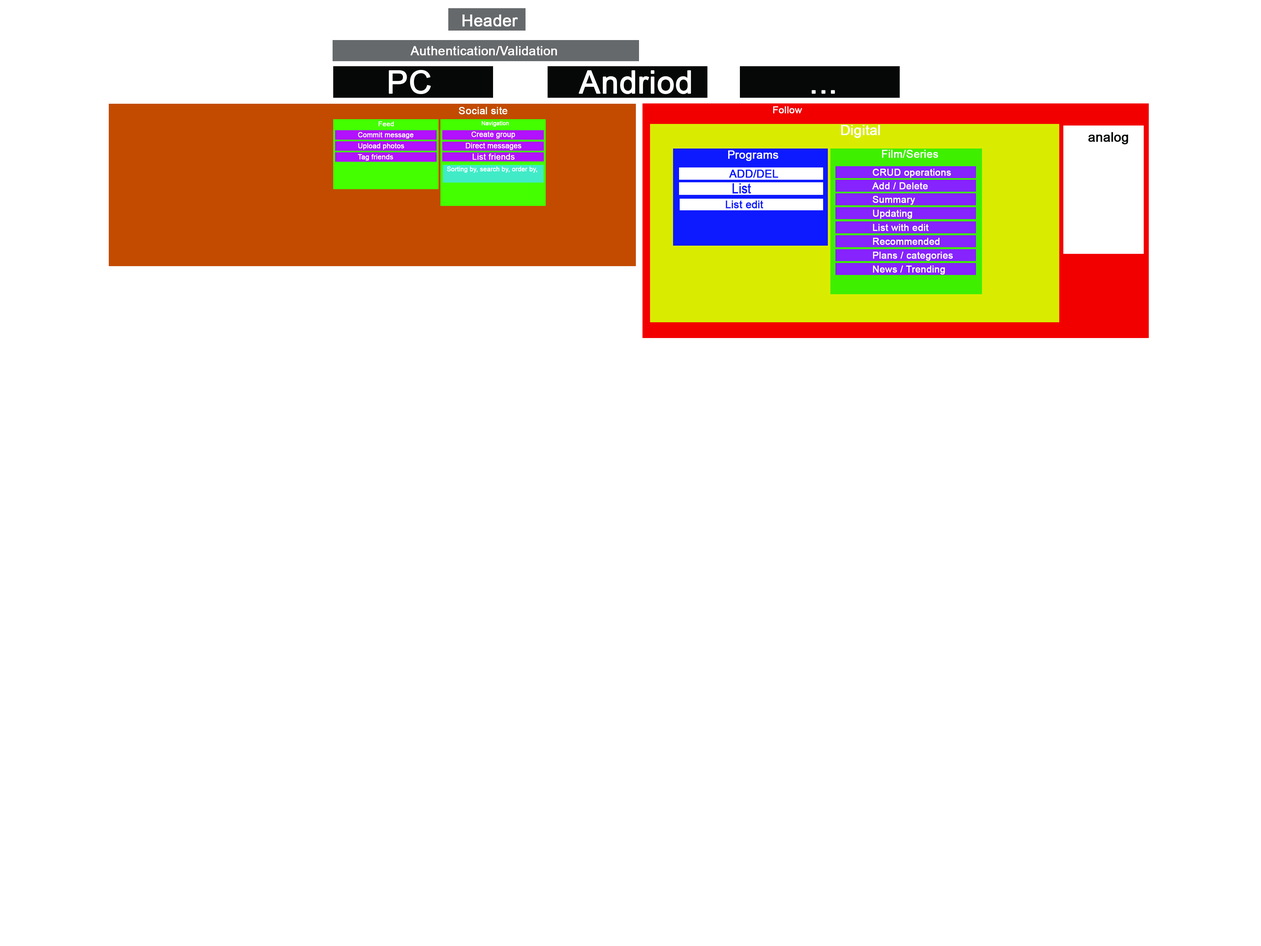
<style>
.page{position:relative;width:1261px;height:946px;background:#ffffff}
.page>*{position:absolute;margin:0}
.t1{font:16.5px "ArialMT";color:#ffffff;font-weight:bold}
.t2{font:12.7px "ArialMT";color:#ffffff;font-weight:bold}
.t3{font:31.5px "ArialMT";color:#ffffff;font-weight:bold}
.t4{font:10.2px "ArialMT";color:#ffffff;font-weight:bold}
.t5{font:9.8px "ArialMT";color:#ffffff;font-weight:bold}
.t6{font:6.8px "ArialMT";color:#ffffff;font-weight:bold}
.t7{font:5.6px "ArialMT";color:#ffffff;font-weight:bold}
.t8{font:13.8px "ArialMT";color:#ffffff;font-weight:bold}
.t9{font:6.9px "ArialMT";color:#ffffff;font-weight:bold}
.t10{font:7.2px "ArialMT";color:#ffffff;font-weight:bold}
.t11{font:13px "ArialMT";color:#060808;font-weight:bold}
.t12{font:10.9px "ArialMT";color:#ffffff;font-weight:bold}
.t13{font:8.3px "ArialMT";color:#ffffff;font-weight:bold}
.t14{font:11.3px "ArialMT";color:#ffffff;font-weight:bold}
.t15{font:6.3px "ArialMT";color:#ffffff;font-weight:bold}
.t16{font:10.9px "ArialMT";color:#0d19ff;font-weight:bold}
.t17{font:9.6px "ArialMT";color:#ffffff;font-weight:bold}
.t18{font:13.9px "ArialMT";color:#0d19ff;font-weight:bold;scale:0.84 1}
.t19{font:10.3px "ArialMT";color:#0d19ff;font-weight:bold}
</style>
<div class="page">
<p class="t1" style="left:462px;top:15px;width:56px;height:11px">Header</p>
<p class="t2" style="left:410px;top:46px;width:147px;height:9px">Authentication/Validation</p>
<p class="t3" style="left:389px;top:70px;width:42px;height:24px">PC</p>
<p class="t3" style="left:578px;top:70px;width:113px;height:24px">Andriod</p>
<p class="t3" style="left:811px;top:90px;width:24px;height:4px">...</p>
<p class="t4" style="left:459px;top:107px;width:49px;height:7px">Social site</p>
<p class="t5" style="left:773px;top:106px;width:29px;height:7px">Follow</p>
<p class="t6" style="left:379px;top:121px;width:15px;height:5px">Feed</p>
<p class="t7" style="left:482px;top:121px;width:27px;height:6px">Navigation</p>
<p class="t8" style="left:841px;top:125px;width:39px;height:13px">Digital</p>
<p class="t9" style="left:358px;top:132px;width:56px;height:7px">Commit message</p>
<p class="t10" style="left:471px;top:131px;width:44px;height:8px">Create group</p>
<p class="t11" style="left:1088px;top:132px;width:40px;height:12px">analog</p>
<p class="t9" style="left:358px;top:143px;width:46px;height:7px">Upload photos</p>
<p class="t10" style="left:466px;top:143px;width:55px;height:7px">Direct messages</p>
<p class="t12" style="left:882px;top:150px;width:56px;height:8px">Film/Series</p>
<p class="t9" style="left:358px;top:154px;width:35px;height:7px">Tag friends</p>
<p class="t13" style="left:473px;top:154px;width:42px;height:6px">List friends</p>
<p class="t14" style="left:728px;top:150px;width:50px;height:11px">Programs</p>
<p class="t15" style="left:447px;top:166px;width:90px;height:7px">Sorting by, search by, order by,</p>
<p class="t16" style="left:729px;top:170px;width:49px;height:8px">ADD/DEL</p>
<p class="t17" style="left:873px;top:169px;width:78px;height:9px">CRUD operations</p>
<p class="t18" style="left:732px;top:183px;width:19px;height:11px">List</p>
<p class="t17" style="left:872px;top:182px;width:56px;height:7px">Add / Delete</p>
<p class="t17" style="left:873px;top:196px;width:42px;height:9px">Summary</p>
<p class="t19" style="left:726px;top:200px;width:37px;height:8px">List edit</p>
<p class="t17" style="left:873px;top:210px;width:39px;height:9px">Updating</p>
<p class="t17" style="left:873px;top:224px;width:56px;height:7px">List with edit</p>
<p class="t17" style="left:873px;top:238px;width:66px;height:7px">Recommended</p>
<p class="t17" style="left:873px;top:252px;width:80px;height:9px">Plans / categories</p>
<p class="t17" style="left:873px;top:265px;width:72px;height:10px">News / Trending</p>
</div>
